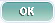
<style>
.page{position:relative;width:55px;height:23px}
.page>*{position:absolute;margin:0}
.t1{font:10.7px "Arial-BoldMT";letter-spacing:0.025em;color:#fdfdfd}
</style>
<div class="page">
<p class="t1" style="left:20px;top:7px;width:14px;height:8px">OK</p>
</div>
